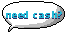
<style>
.page{position:relative;width:67px;height:32px;background:#ffffff}
.page>*{position:absolute;margin:0}
.t1{font:10px "Consolas-Bold";letter-spacing:0.06em;color:#22b8d6}
</style>
<div class="page">
<p class="t1" style="left:6px;top:11px;width:56px;height:7px">need cash?</p>
</div>
